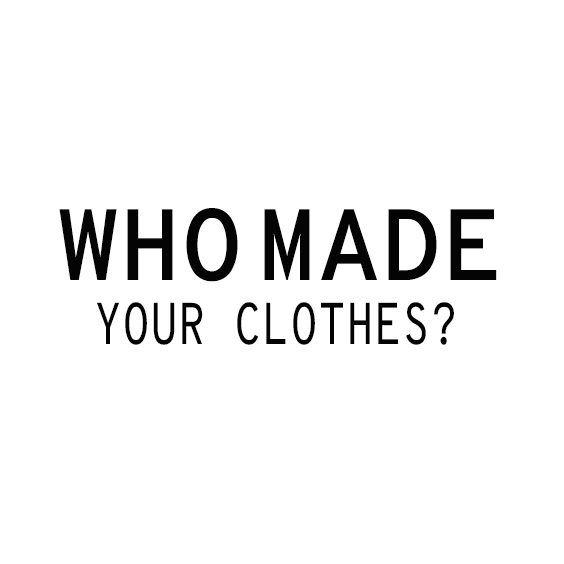
<style>
.page{position:relative;width:564px;height:564px;background:#ffffff}
.page>*{position:absolute;margin:0}
.t1{font:101px "OverpassMono-SemiBold";color:#040404}
.t2{font:58.6px "OverpassMono-Regular";color:#040404;scale:0.78 1}
</style>
<div class="page">
<p class="t1" style="left:59px;top:208px;width:179px;height:74px">WHO</p>
<p class="t1" style="left:264px;top:209px;width:233px;height:71px">MADE</p>
<p class="t2" style="left:97px;top:302px;width:357px;height:43px">YOUR CLOTHES?</p>
</div>
